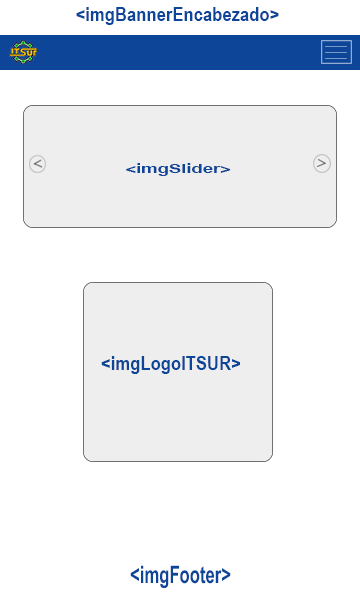
<style>
.page{position:relative;width:360px;height:600px;background:#ffffff}
.page>*{position:absolute;margin:0}
.t1{font:20.3px "ArialNarrow-Bold";color:#0d4598}
.t2{font:12.5px "ArialNarrow-Bold";color:#0d4598;scale:1.8 1}
.t3{font:23.9px "ArialNarrow-Bold";color:#0d4598;scale:0.85 1}
</style>
<div class="page">
<p class="t1" style="left:76px;top:7px;width:203px;height:18px">&lt;imgBannerEncabezado&gt;</p>
<p class="t2" style="left:126px;top:163px;width:105px;height:13px">&lt;imgSlider&gt;</p>
<p class="t1" style="left:101px;top:356px;width:139px;height:18px">&lt;imgLogoITSUR&gt;</p>
<p class="t3" style="left:130px;top:565px;width:101px;height:23px">&lt;imgFooter&gt;</p>
</div>
